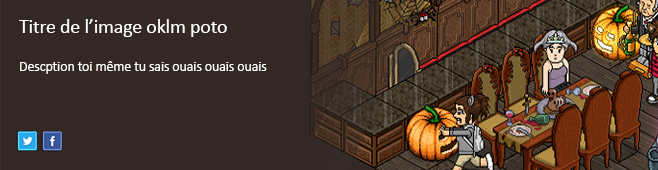
<style>
.page{position:relative;width:658px;height:170px;background:#332824}
.page>*{position:absolute;margin:0}
.t1{font:20px "Calibri";letter-spacing:-0.01em;color:#ffffff}
.t2{font:14px "Calibri";letter-spacing:-0.01em;color:#ffffff}
</style>
<div class="page">
<p class="t1" style="left:19px;top:19px;width:208px;height:18px">Titre de l’image oklm poto</p>
<p class="t2" style="left:20px;top:61px;width:247px;height:13px">Descption toi même tu sais ouais ouais ouais</p>
</div>
